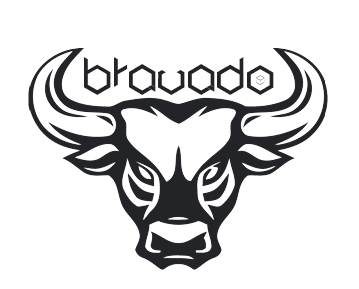
<style>
.page{position:relative;width:359px;height:289px;background:#ffffff}
.page>*{position:absolute;margin:0}
.t1{font:36.3px "Cubic";color:#232427}
</style>
<div class="page">
<p class="t1" style="left:84px;top:57px;width:190px;height:38px">Bravado</p>
</div>
